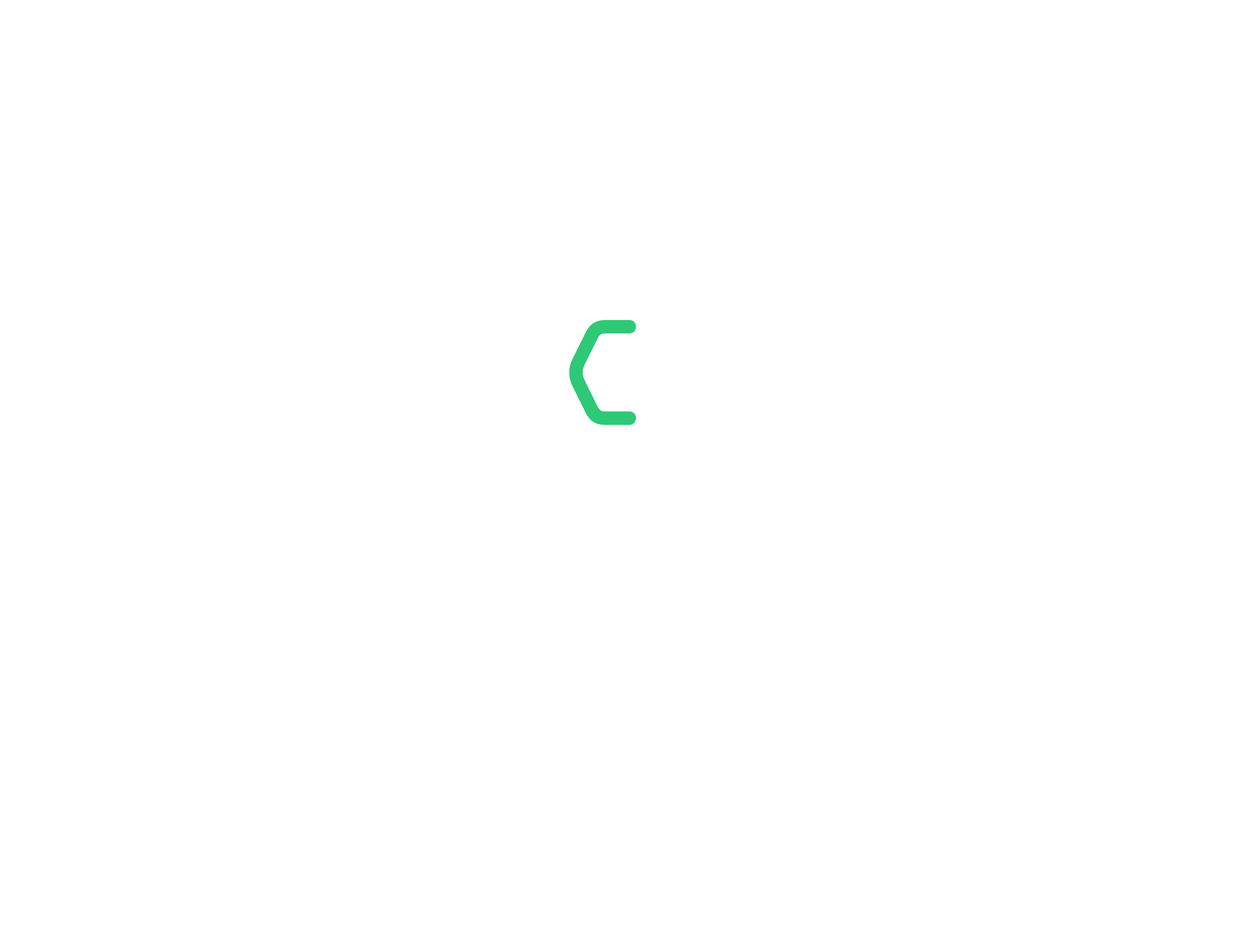
<style>
.page{position:relative;width:1253px;height:952px;background:#ffffff}
.page>*{position:absolute;margin:0}
.t1{font:134.9px "OCRAStd";color:#2ec976}
</style>
<div class="page">
<p class="t1" style="left:569px;top:320px;width:67px;height:105px">C</p>
</div>
